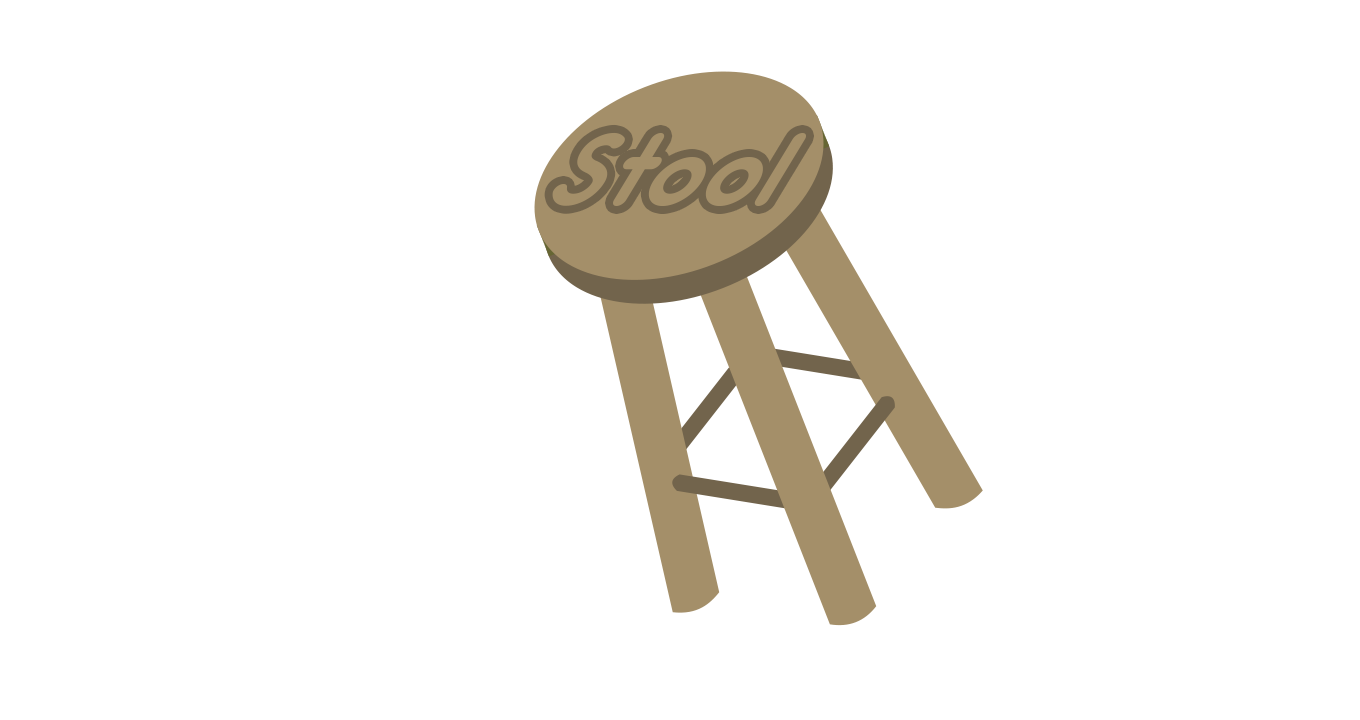
<style>
.page{position:relative;width:1360px;height:720px;background:#ffffff}
.page>*{position:absolute;margin:0}
.t1{font:122px "Odin-Bold";color:#a48f69;scale:0.86 1}
</style>
<div class="page">
<p class="t1" style="left:552px;top:132px;width:254px;height:74px">Stool</p>
</div>
